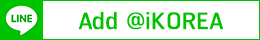
<style>
.page{position:relative;width:260px;height:40px;background:#ffffff}
.page>*{position:absolute;margin:0}
.t1{font:30px "RSU";color:#00c300}
</style>
<div class="page">
<p class="t1" style="left:78px;top:11px;width:145px;height:19px">Add @iKOREA</p>
</div>
